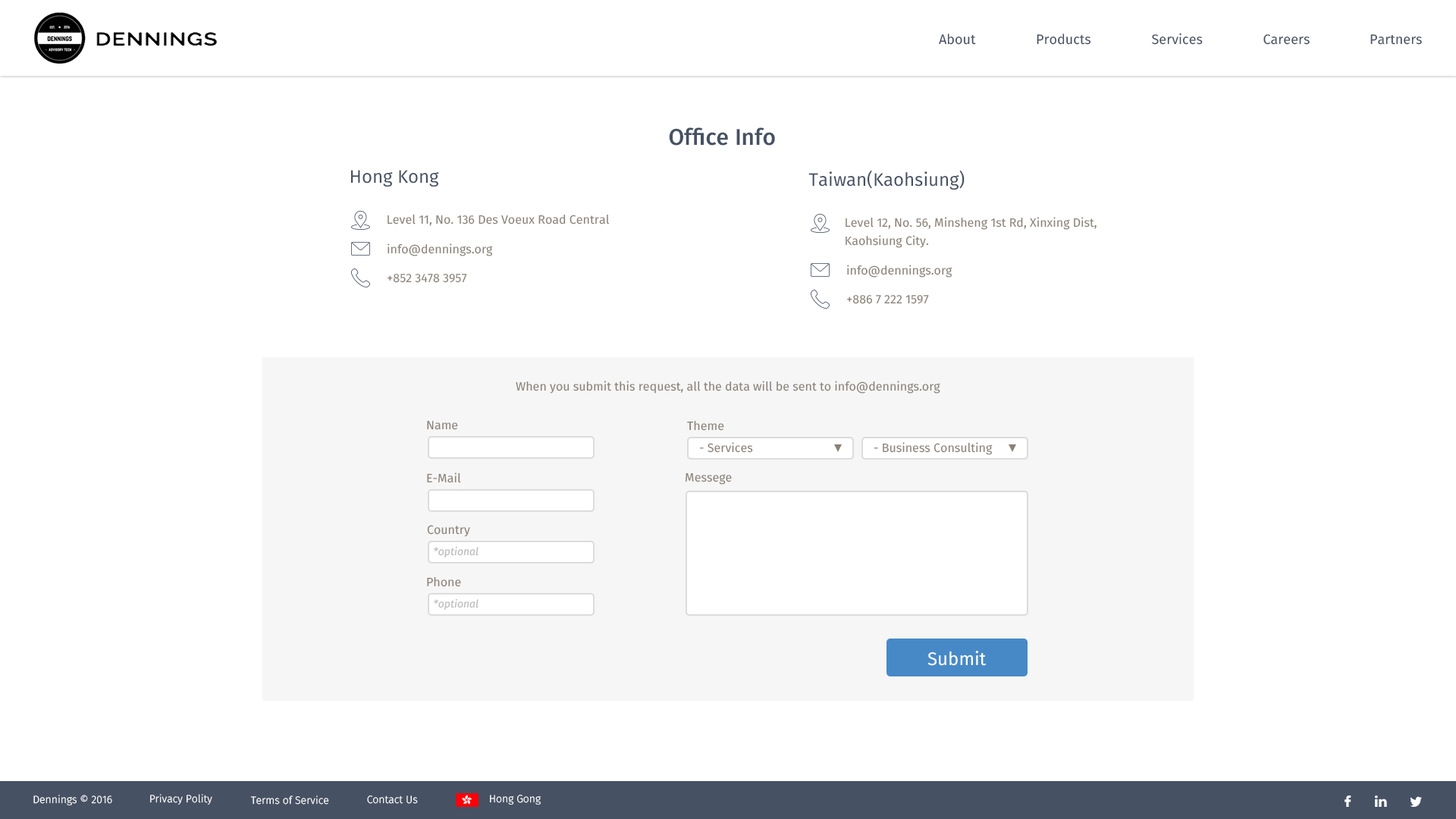
<style>
.page{position:relative;width:1456px;height:819px;background:#ffffff}
.page>*{position:absolute;margin:0}
.t1{font:13.6px "FiraSans-Regular";color:#465163}
.t2{font:22.7px "FiraSans-Medium";color:#465163}
.t3{font:18.2px "FiraSans-Regular";color:#465163}
.t4{font:12.1px "FiraSans-Regular";color:#898176}
.t5{font:12.1px/18.2px "FiraSans-Regular";color:#898176}
.t6{font:10.6px "FiraSans-Italic";color:#bababa}
.t7{font:18.2px "FiraSans-Regular";color:#ffffff}
.t8{font:10.6px "FiraSans-Light";color:#ffffff}
</style>
<div class="page">
<p class="t1" style="left:939px;top:33px;width:37px;height:12px">About</p>
<p class="t1" style="left:1037px;top:33px;width:54px;height:12px">Products</p>
<p class="t1" style="left:1152px;top:33px;width:51px;height:12px">Services</p>
<p class="t1" style="left:1263px;top:34px;width:47px;height:11px">Careers</p>
<p class="t1" style="left:1370px;top:34px;width:52px;height:11px">Partners</p>
<p class="t2" style="left:669px;top:127px;width:106px;height:19px">Office Info</p>
<p class="t3" style="left:351px;top:170px;width:88px;height:17px">Hong Kong</p>
<p class="t3" style="left:808px;top:170px;width:157px;height:20px">Taiwan(Kaohsiung)</p>
<p class="t4" style="left:388px;top:214px;width:221px;height:12px">Level 11, No. 136 Des Voeux Road Central</p>
<p class="t5" style="left:846px;top:217px;width:251px;height:31px">Level 12, No. 56, Minsheng 1st Rd, Xinxing Dist, Kaohsiung City.</p>
<p class="t4" style="left:388px;top:243px;width:105px;height:13px">info@dennings.org</p>
<p class="t4" style="left:847px;top:265px;width:105px;height:13px">info@dennings.org</p>
<p class="t4" style="left:388px;top:274px;width:79px;height:9px">+852 3478 3957</p>
<p class="t4" style="left:847px;top:295px;width:82px;height:9px">+886 7 222 1597</p>
<p class="t4" style="left:516px;top:381px;width:424px;height:13px">When you submit this request, all the data will be sent to info@dennings.org</p>
<p class="t4" style="left:427px;top:420px;width:31px;height:10px">Name</p>
<p class="t4" style="left:687px;top:421px;width:37px;height:10px">Theme</p>
<p class="t4" style="left:700px;top:442px;width:53px;height:11px">- Services</p>
<p class="t4" style="left:874px;top:442px;width:119px;height:13px">- Business Consulting</p>
<p class="t4" style="left:427px;top:472px;width:34px;height:11px">E-Mail</p>
<p class="t4" style="left:685px;top:472px;width:47px;height:13px">Messege</p>
<p class="t4" style="left:427px;top:525px;width:43px;height:12px">Country</p>
<p class="t6" style="left:434px;top:546px;width:45px;height:12px">*optional</p>
<p class="t4" style="left:427px;top:577px;width:34px;height:10px">Phone</p>
<p class="t6" style="left:434px;top:598px;width:45px;height:12px">*optional</p>
<p class="t7" style="left:927px;top:651px;width:60px;height:15px">Submit</p>
<p class="t8" style="left:33px;top:795px;width:79px;height:10px">Dennings © 2016</p>
<p class="t8" style="left:150px;top:794px;width:62px;height:11px">Privacy Polity</p>
<p class="t8" style="left:250px;top:795px;width:79px;height:10px">Terms of Service</p>
<p class="t8" style="left:367px;top:795px;width:51px;height:9px">Contact Us</p>
<p class="t8" style="left:490px;top:795px;width:51px;height:10px">Hong Gong</p>
</div>
